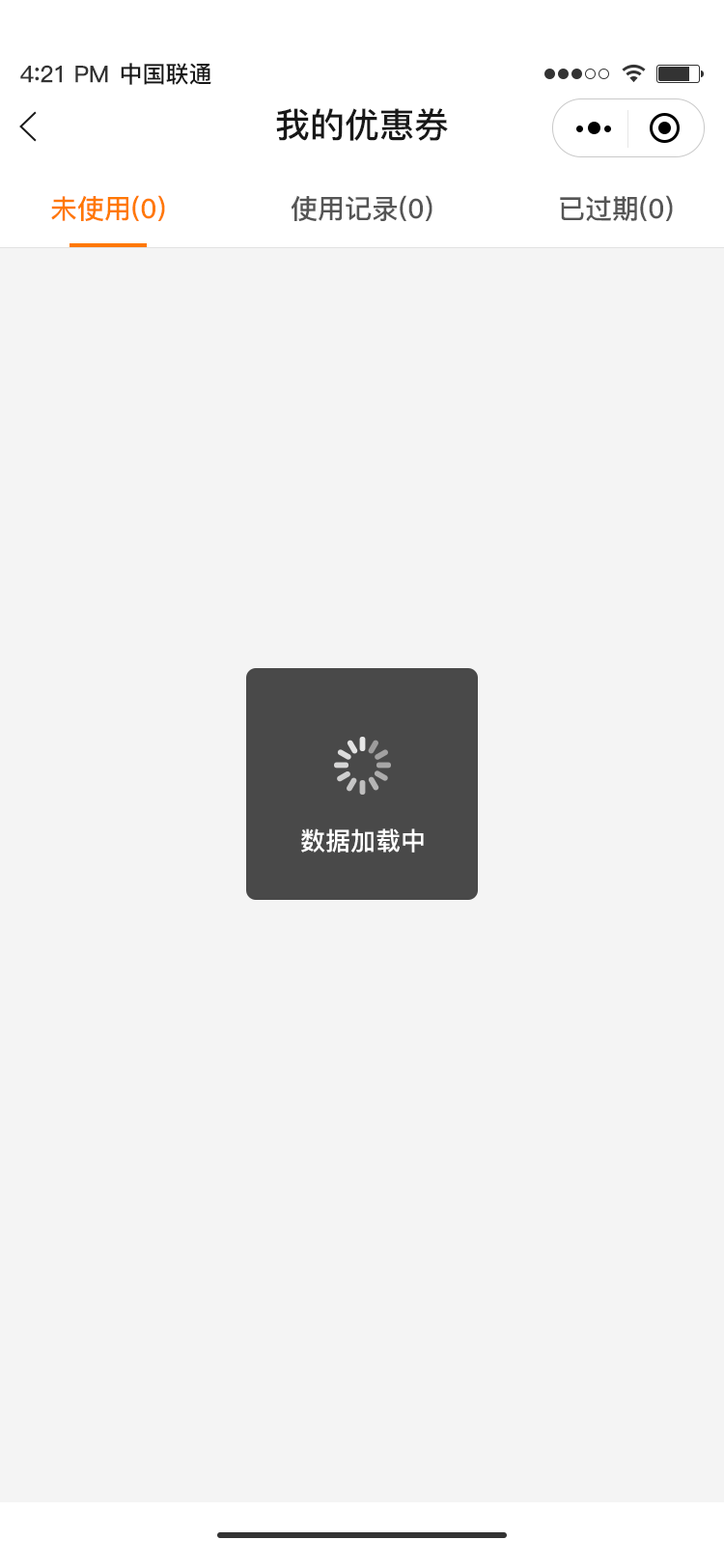
<style>
.page{position:relative;width:724px;height:1568px;background:#f4f4f4}
.page>*{position:absolute;margin:0}
.t1{font:23.2px "PingFang-SC-Bold";letter-spacing:-0.02em;color:#333333}
.t2{font:25.1px "PingFang-SC-Bold";letter-spacing:-0.02em;color:#333333}
.t3{font:23.2px "PingFang-SC-Bold";color:#181818}
.t4{font:34.8px "PingFang-SC-Bold";color:#181818}
.t5{font:27px "PingFang-SC-Bold";color:#ff7800}
.t6{font:27px "PingFang-SC-Bold";color:#555555}
.t7{font:25.1px "PingFang-SC-Bold";color:#ffffff}
</style>
<div class="page">
<p class="t1" style="left:20px;top:65px;width:88px;height:18px">4<span class="t2">:</span>21 PM</p>
<p class="t3" style="left:121px;top:63px;width:90px;height:22px">中国联通</p>
<p class="t4" style="left:276px;top:108px;width:172px;height:33px">我的优惠券</p>
<p class="t5" style="left:51px;top:195px;width:114px;height:26px">未使用(0)</p>
<p class="t6" style="left:291px;top:195px;width:142px;height:26px">使用记录(0)</p>
<p class="t6" style="left:560px;top:195px;width:113px;height:26px">已过期(0)</p>
<p class="t7" style="left:301px;top:828px;width:123px;height:25px">数据加载中</p>
</div>
